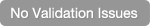
<style>
.page{position:relative;width:150px;height:26px;background:#969697}
.page>*{position:absolute;margin:0}
.t1{font:14px "HelveticaNeue";color:#ffffff}
</style>
<div class="page">
<p class="t1" style="left:11px;top:7px;width:127px;height:11px">No Validation Issues</p>
</div>
